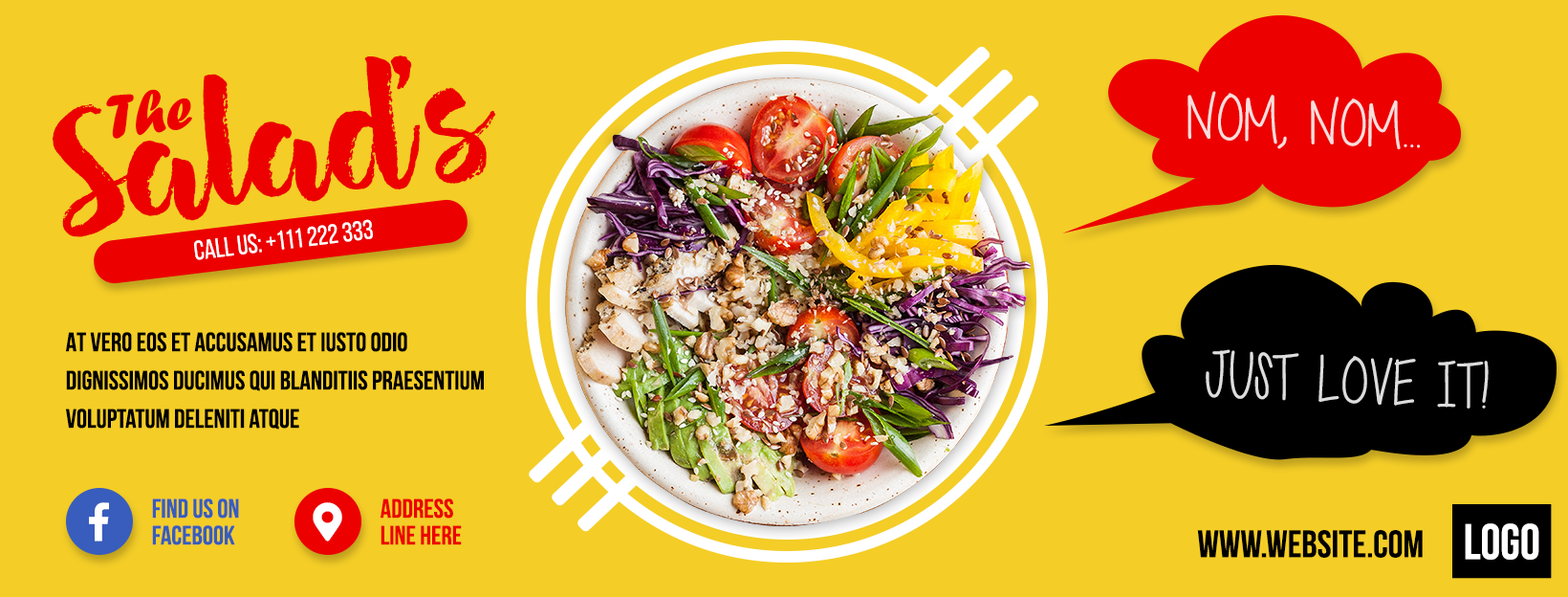
<style>
.page{position:relative;width:1568px;height:597px;background:#f4cd27}
.page>*{position:absolute;margin:0}
.t1{font:169px "Hensa-Regular";color:#ec0000}
.t2{font:169px "Hensa-Regular";letter-spacing:-0.1em;color:#ec0000}
.t3{font:63.9px "ForteMT";color:#ec0000}
.t4{font:66.9px "Cutie-Patootie-Skinny";color:#fbdddd;text-transform:uppercase}
.t5{font:26.8px "BebasNeueRegular";color:#ffffff}
.t6{font:26.8px/38.2px "BebasNeueBold";color:#000000}
.t7{font:66.9px "Cutie-Patootie-Skinny";color:#dddddd;text-transform:uppercase}
.t8{font:26.8px/26.8px "BebasNeueBold";color:#385dbd}
.t9{font:26.8px/26.8px "BebasNeueBold";color:#ec0000}
.t10{font:38.2px "BebasNeueBold";color:#000000}
.t11{font:50.2px "BebasNeueBold";color:#ffffff}
</style>
<div class="page">
<p class="t1" style="left:53px;top:55px;width:442px;height:182px;rotate:-9deg">Sala<span class="t2">d's</span></p>
<p class="t3" style="left:106px;top:89px;width:86px;height:50px;rotate:-8deg">The</p>
<p class="t4" style="left:1187px;top:91px;width:233px;height:58px;rotate:3deg">Nom, nom...</p>
<p class="t5" style="left:194px;top:219px;width:179px;height:41px;rotate:-7deg">CALL US: +111 222 333</p>
<p class="t6" style="left:66px;top:332px;width:418px;height:97px">At vero eos et accusamus et iusto odio dignissimos ducimus qui blanditiis praesentium voluptatum deleniti atque</p>
<p class="t7" style="left:1206px;top:349px;width:283px;height:59px;rotate:3deg">Just Love it!</p>
<p class="t8" style="left:152px;top:498px;width:87px;height:47px">Find us on <br>facebook</p>
<p class="t9" style="left:381px;top:498px;width:81px;height:47px">Address<br>Line here</p>
<p class="t10" style="left:1197px;top:530px;width:226px;height:27px">www.website.com</p>
<p class="t11" style="left:1465px;top:523px;width:74px;height:36px">logo</p>
</div>
